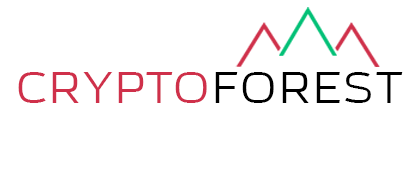
<style>
.page{position:relative;width:420px;height:176px;background:#ffffff}
.page>*{position:absolute;margin:0}
.t1{font:48px "AzoftSans";letter-spacing:0.05em;color:#cf304a}
.t2{font:48px "AzoftSans";letter-spacing:0.05em;color:#000000}
</style>
<div class="page">
<p class="t1" style="left:18px;top:72px;width:385px;height:31px">CRYPTO<span class="t2">FOREST</span></p>
</div>
